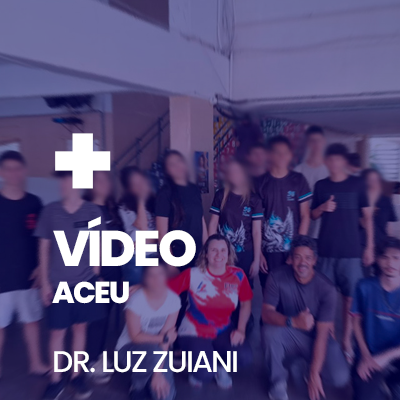
<style>
.page{position:relative;width:400px;height:400px}
.page>*{position:absolute;margin:0}
.t1{font:107.6px "Poppins-ExtraBold";letter-spacing:-0.06em;color:#ffffff;text-transform:uppercase}
.t2{font:30px/34.4px "Poppins-Medium";letter-spacing:-0.06em;color:#ffffff;text-transform:uppercase}
.t3{font:50px/37.4px "Poppins-ExtraBold";letter-spacing:-0.06em;color:#ffffff;text-transform:uppercase}
.t4{font:30px/37.4px "Poppins-ExtraBold";letter-spacing:-0.06em;color:#ffffff;text-transform:uppercase}
</style>
<div class="page">
<p class="t1" style="left:55px;top:133px;width:56px;height:56px">+</p>
<p class="t2" style="left:52px;top:216px;width:185px;height:157px"><span class="t3"><br>vídeo<br></span><span class="t4">aceu<br></span><br>dr. luz zuiani</p>
</div>
